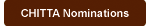
<style>
.page{position:relative;width:150px;height:26px;background:#551e03}
.page>*{position:absolute;margin:0}
.t1{font:11px "Arial-BoldMT";color:#ffffff}
</style>
<div class="page">
<p class="t1" style="left:21px;top:9px;width:108px;height:8px">CHITTA Nominations</p>
<p class="t1" style="left:21px;top:9px;width:108px;height:8px">CHITTA Nominations</p>
</div>
